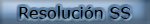
<style>
.page{position:relative;width:150px;height:24px}
.page>*{position:absolute;margin:0}
.t1{font:16px "Verdana";color:#000000}
</style>
<div class="page">
<p class="t1" style="left:19px;top:6px;width:112px;height:13px">Resolución SS</p>
</div>
